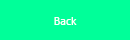
<style>
.page{position:relative;width:130px;height:40px;background:#00ff99}
.page>*{position:absolute;margin:0}
.t1{font:12px "Calibri";color:#ffffff}
</style>
<div class="page">
<p class="t1" style="left:54px;top:17px;width:23px;height:8px">Back</p>
</div>
